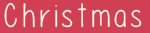
<style>
.page{position:relative;width:150px;height:33px;background:#d13f54}
.page>*{position:absolute;margin:0}
.t1{font:34px "Please-write-me-a-song";letter-spacing:0.12em;color:#f8f3e4}
</style>
<div class="page">
<p class="t1" style="left:4px;top:2px;width:138px;height:26px">Christmas</p>
</div>
